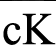
<style>
.page{position:relative;width:56px;height:56px;background:#ffffff}
.page>*{position:absolute;margin:0}
.t1{font:68.1px "Microsoft-Himalaya";color:#000000}
</style>
<div class="page">
<p class="t1" style="left:3px;top:12px;width:53px;height:32px">cK</p>
</div>
